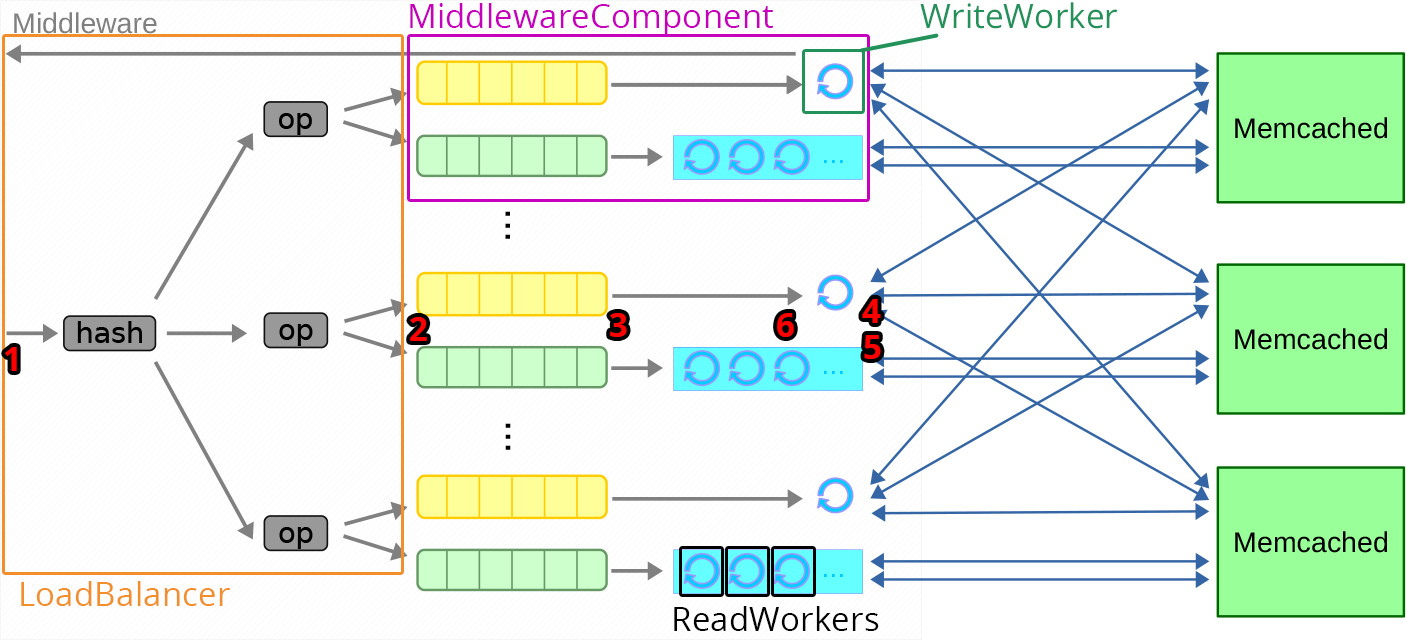
<style>
.page{position:relative;width:1406px;height:640px;background:#ffffff}
.page>*{position:absolute;margin:0}
.t1{font:33.3px "OpenSans";color:#c600bc}
.t2{font:33.7px "OpenSans";color:#23925a}
.t3{font:33.3px "OpenSans-Bold";color:#ff0000}
.t4{font:33.3px "OpenSans";color:#f38e2c}
.t5{font:33.3px "OpenSans";color:#000000}
</style>
<div class="page">
<p class="t1" style="left:410px;top:3px;width:363px;height:33px">MiddlewareComponent</p>
<p class="t2" style="left:920px;top:2px;width:197px;height:27px">WriteWorker</p>
<p class="t3" style="left:862px;top:299px;width:19px;height:24px">4</p>
<p class="t3" style="left:410px;top:317px;width:17px;height:24px">2</p>
<p class="t3" style="left:610px;top:313px;width:17px;height:24px">3</p>
<p class="t3" style="left:777px;top:313px;width:17px;height:24px">6</p>
<p class="t3" style="left:864px;top:335px;width:17px;height:24px">5</p>
<p class="t3" style="left:5px;top:347px;width:12px;height:24px">1</p>
<p class="t4" style="left:21px;top:581px;width:209px;height:25px">LoadBalancer</p>
<p class="t5" style="left:674px;top:606px;width:205px;height:25px">ReadWorkers</p>
</div>
